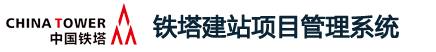
<style>
.page{position:relative;width:436px;height:52px;background:#ffffff}
.page>*{position:absolute;margin:0}
.t1{font:24px "MicrosoftYaHei";color:#0a2536;font-weight:bold}
</style>
<div class="page">
<p class="t1" style="left:153px;top:14px;width:246px;height:25px">铁塔建站项目管理系统</p>
</div>
